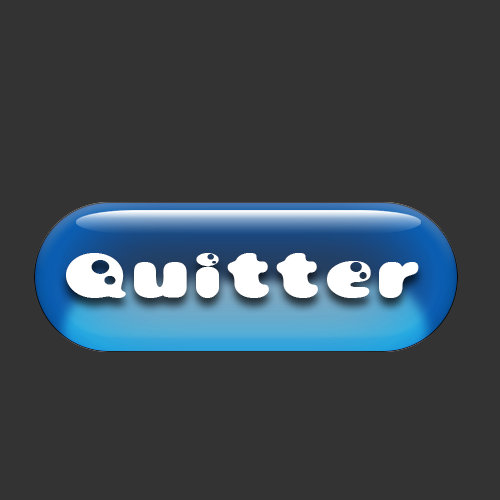
<style>
.page{position:relative;width:500px;height:500px;background:#333333}
.page>*{position:absolute;margin:0}
.t1{font:56px "Bambina";color:#ffffff;scale:1.25 1}
</style>
<div class="page">
<p class="t1" style="left:66px;top:253px;width:353px;height:45px">Quitter</p>
</div>
